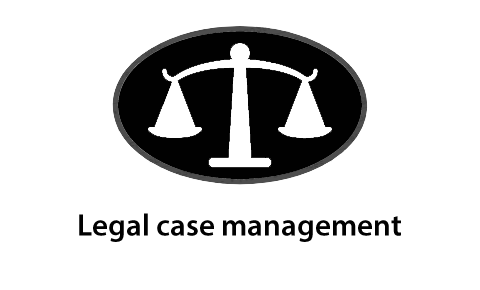
<style>
.page{position:relative;width:480px;height:290px;background:#ffffff}
.page>*{position:absolute;margin:0}
.t1{font:31px "MyriadPro-Semibold";color:#010101}
</style>
<div class="page">
<p class="t1" style="left:79px;top:213px;width:322px;height:29px">Legal case management</p>
</div>
